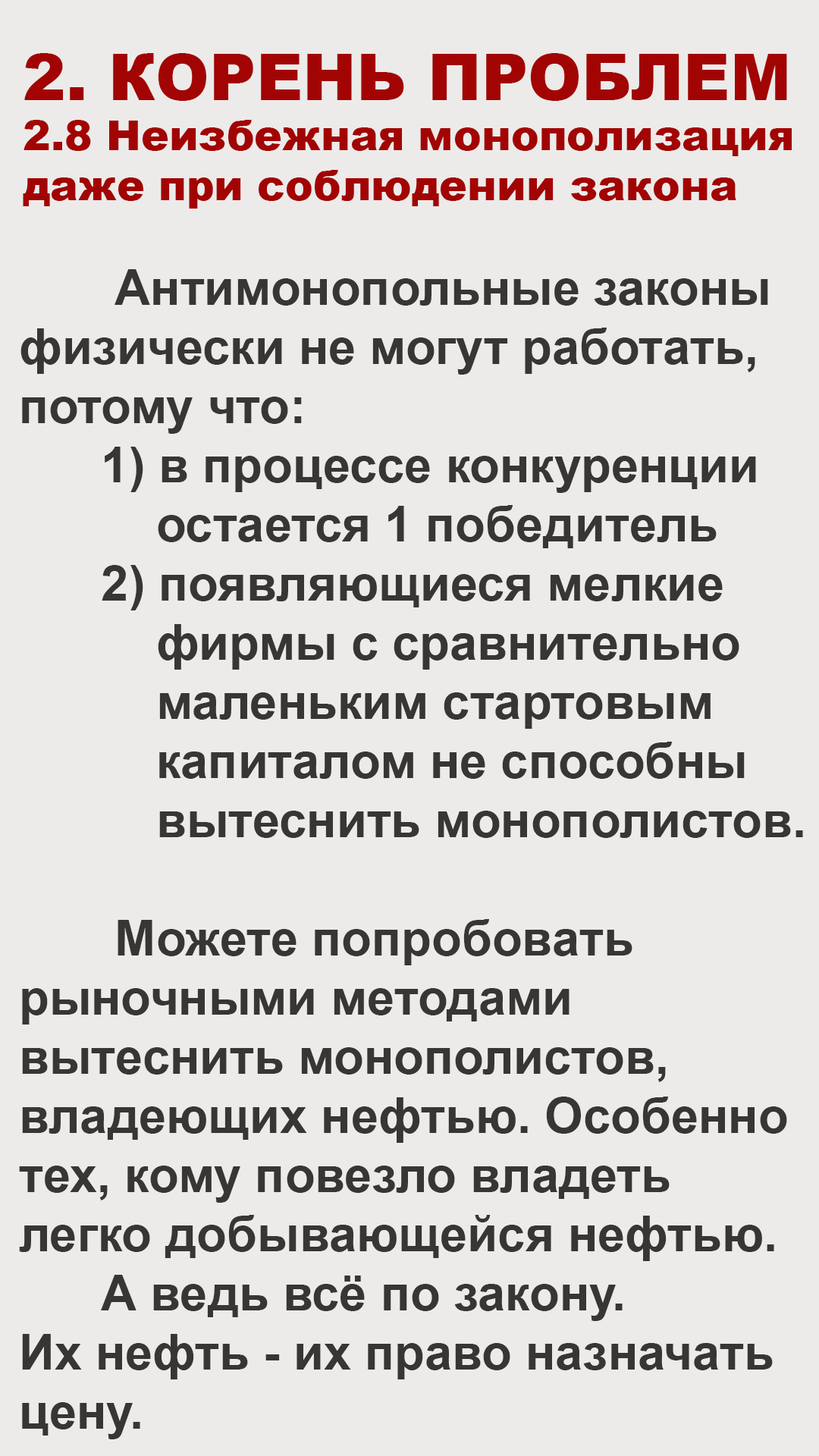
<style>
.page{position:relative;width:819px;height:1456px;background:#ecebe9}
.page>*{position:absolute;margin:0}
.t1{font:41.7px "Arial-Black";color:#a20403}
.t2{font:64.5px "Arial-Black";color:#a20403}
.t3{font:49.3px "Arial-BoldMT";color:#373634}
</style>
<div class="page">
<p class="t1" style="left:23px;top:53px;width:769px;height:156px"><span class="t2">2. КОРЕНЬ ПРОБЛЕМ<br></span>2.8 Неизбежная монополизация<br>даже при соблюдении закона</p>
<p class="t3" style="left:19px;top:269px;width:784px;height:1170px">Антимонопольные законы<br>физически не могут работать,<br>потому что:<br>      1) в процессе конкуренции<br>          остается 1 победитель<br>      2) появляющиеся мелкие<br>          фирмы с сравнительно<br>          маленьким стартовым<br>          капиталом не способны<br>          вытеснить монополистов.<br><br>       Можете попробовать<br>рыночными методами<br>вытеснить монополистов,<br>владеющих нефтью. Особенно<br>тех, кому повезло владеть<br>легко добывающейся нефтью.<br>      А ведь всё по закону. <br>Их нефть - их право назначать <br>цену.</p>
</div>
